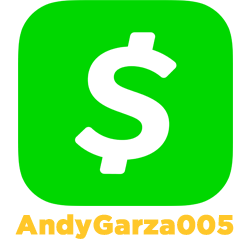
<style>
.page{position:relative;width:250px;height:250px;background:#00d700}
.page>*{position:absolute;margin:0}
.t1{font:27px "Gotham-Black";color:#ffc729;font-weight:bold}
</style>
<div class="page">
<p class="t1" style="left:15px;top:214px;width:219px;height:25px">AndyGarza005</p>
</div>
